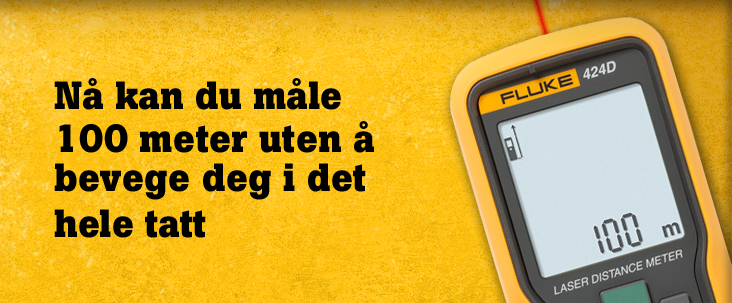
<style>
.page{position:relative;width:732px;height:303px}
.page>*{position:absolute;margin:0}
.t1{font:39px/32px "BotonPro-Bold";color:#000000}
.t2{font:39px/39px "BotonPro-Bold";color:#000000}
.t3{font:39px/36px "BotonPro-Bold";color:#000000}
</style>
<div class="page">
<p class="t1" style="left:54px;top:78px;width:320px;height:160px"><span class="t2">Nå kan du måle <br></span>100 meter uten å <span class="t2">bevege deg i det <br></span><span class="t3">hele tatt</span></p>
</div>
